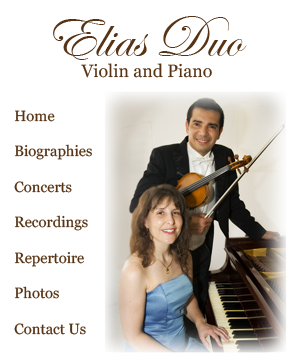
<style>
.page{position:relative;width:300px;height:363px;background:#ffffff}
.page>*{position:absolute;margin:0}
.t1{font:17.8px "Georgia";color:#573313}
.t2{font:59.2px "EdwardianScriptITC";color:#573313}
.t3{font:14.8px "Georgia";color:#573313}
</style>
<div class="page">
<p class="t1" style="left:53px;top:16px;width:194px;height:62px;text-align:center"><span class="t2">Elias Duo<br></span>  Violin and Piano</p>
<p class="t3" style="left:14px;top:110px;width:78px;height:225px">Home<br><br>Biographies<br><br>Concerts<br><br>Recordings<br><br>Repertoire<br><br>Photos<br><br>Contact Us</p>
</div>
